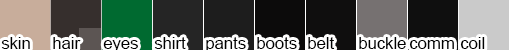
<style>
.page{position:relative;width:509px;height:50px}
.page>*{position:absolute;margin:0}
.t1{font:16.7px "ArialMT";color:#000000}
</style>
<div class="page">
<p class="t1" style="left:1px;top:37px;width:29px;height:12px">skin</p>
<p class="t1" style="left:53px;top:37px;width:28px;height:12px">hair</p>
<p class="t1" style="left:103px;top:40px;width:35px;height:12px">eyes</p>
<p class="t1" style="left:154px;top:37px;width:32px;height:12px">shirt</p>
<p class="t1" style="left:206px;top:37px;width:40px;height:15px">pants</p>
<p class="t1" style="left:257px;top:37px;width:40px;height:12px">boots</p>
<p class="t1" style="left:308px;top:37px;width:27px;height:12px">belt</p>
<p class="t1" style="left:359px;top:37px;width:47px;height:12px">buckle</p>
<p class="t1" style="left:409px;top:40px;width:45px;height:9px">comm</p>
<p class="t1" style="left:460px;top:37px;width:25px;height:12px">coil</p>
</div>
